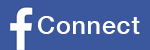
<style>
.page{position:relative;width:150px;height:50px;background:#3b579d}
.page>*{position:absolute;margin:0}
.t1{font:24.5px "HelveticaNeue-Medium";letter-spacing:0.045em;color:#ffffff}
</style>
<div class="page">
<p class="t1" style="left:37px;top:16px;width:103px;height:18px">Connect</p>
</div>
